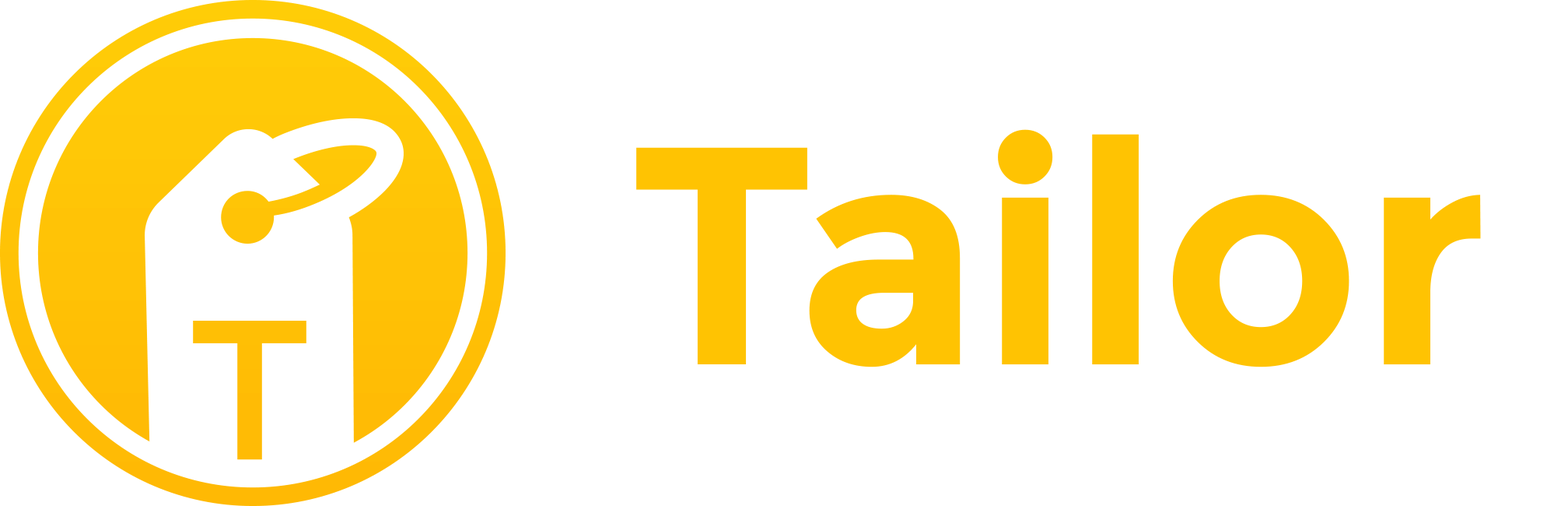
<style>
.page{position:relative;width:1568px;height:506px;background:#ffffff}
.page>*{position:absolute;margin:0}
.t1{font:309.5px "Montserrat-Bold";color:#ffc302}
</style>
<div class="page">
<p class="t1" style="left:636px;top:129px;width:845px;height:238px">Tailor</p>
</div>
